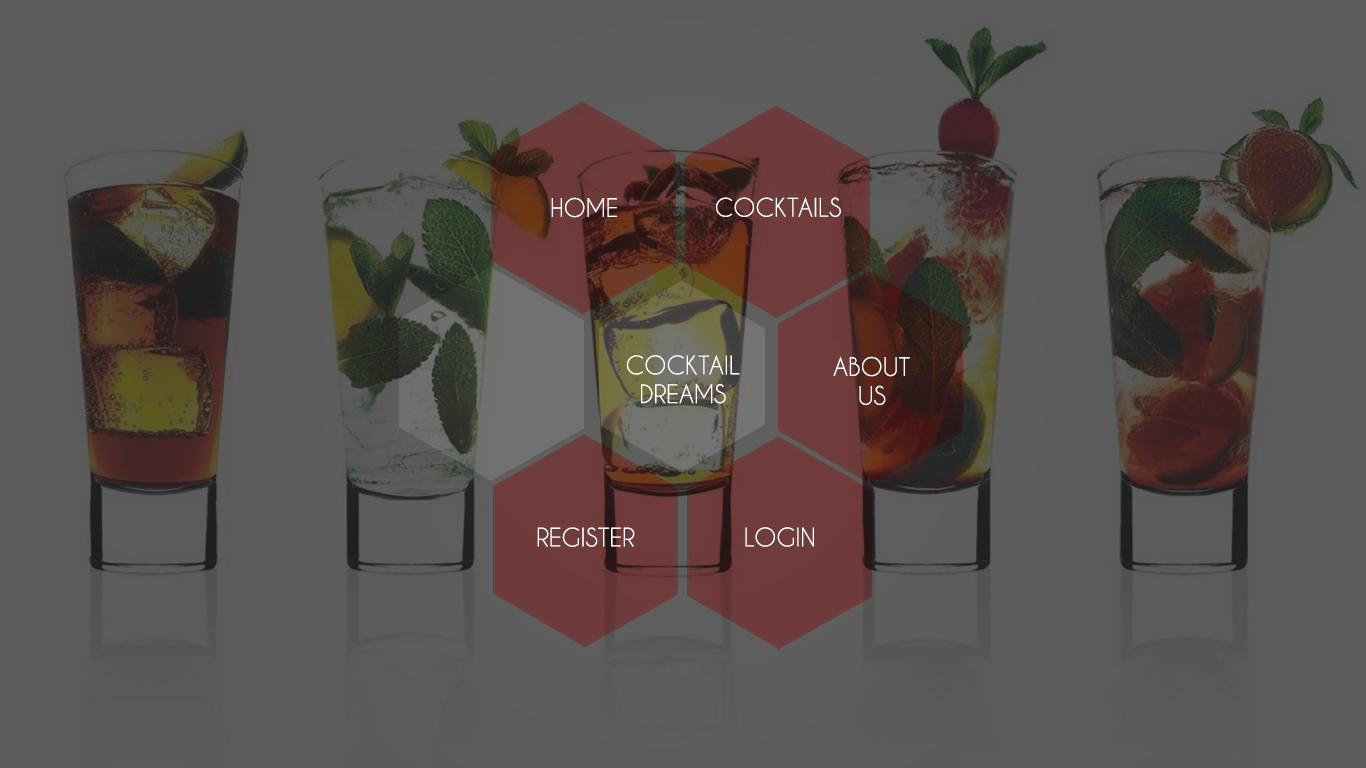
<style>
.page{position:relative;width:1366px;height:768px;background:#5c5c5c}
.page>*{position:absolute;margin:0}
.t1{font:24px "CaviarDreams";color:#ffffff}
</style>
<div class="page">
<p class="t1" style="left:551px;top:197px;width:66px;height:21px">HOME</p>
<p class="t1" style="left:716px;top:197px;width:125px;height:20px">COCKTAILS</p>
<p class="t1" style="left:626px;top:355px;width:114px;height:49px;text-align:center">COCKTAIL<br>DREAMS</p>
<p class="t1" style="left:833px;top:356px;width:77px;height:49px">ABOUT<br>   US</p>
<p class="t1" style="left:537px;top:527px;width:98px;height:20px">REGISTER</p>
<p class="t1" style="left:745px;top:527px;width:69px;height:20px">LOGIN</p>
</div>
